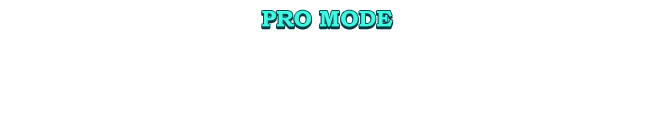
<style>
.page{position:relative;width:652px;height:124px;background:#ffffff}
.page>*{position:absolute;margin:0}
.t1{font:22.5px "BookmanOldStyle-Bold";color:#40fbe0}
</style>
<div class="page">
<p class="t1" style="left:262px;top:10px;width:131px;height:17px">PRO MODE</p>
</div>
